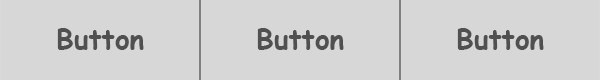
<style>
.page{position:relative;width:600px;height:80px;background:#d7d7d7}
.page>*{position:absolute;margin:0}
.t1{font:28px "ComicSansMS-Bold";color:#505050}
</style>
<div class="page">
<p class="t1" style="left:57px;top:28px;width:87px;height:22px">Button</p>
<p class="t1" style="left:257px;top:28px;width:87px;height:22px">Button</p>
<p class="t1" style="left:457px;top:28px;width:87px;height:22px">Button</p>
</div>
